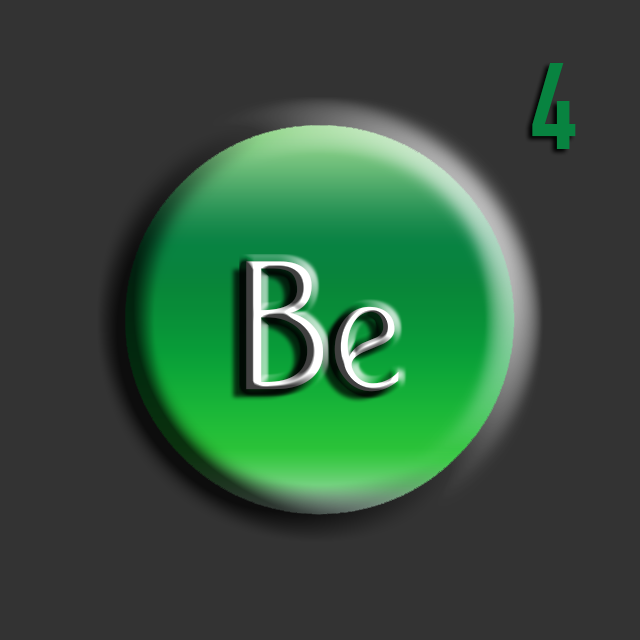
<style>
.page{position:relative;width:640px;height:640px;background:#333333}
.page>*{position:absolute;margin:0}
.t1{font:129px "TGL0-1451Engschrift";color:#088340}
.t2{font:194px "PortCredit-Regular"}
</style>
<div class="page">
<p class="t1" style="left:532px;top:63px;width:44px;height:86px">4</p>
<p class="t2" style="left:246px;top:261px;width:153px;height:131px">Be</p>
</div>
